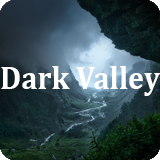
<style>
.page{position:relative;width:160px;height:160px}
.page>*{position:absolute;margin:0}
.t1{font:33.4px "Cambria-Bold";color:#ffffff;scale:0.91 1}
</style>
<div class="page">
<p class="t1" style="left:1px;top:66px;width:159px;height:30px">Dark Valley</p>
</div>
